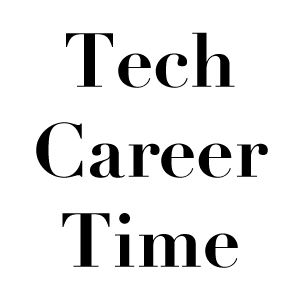
<style>
.page{position:relative;width:300px;height:300px;background:#ffffff}
.page>*{position:absolute;margin:0}
.t1{font:75px "Didot-Bold";color:#000000}
</style>
<div class="page">
<p class="t1" style="left:36px;top:32px;width:232px;height:236px;text-align:center">Tech Career Time</p>
</div>
